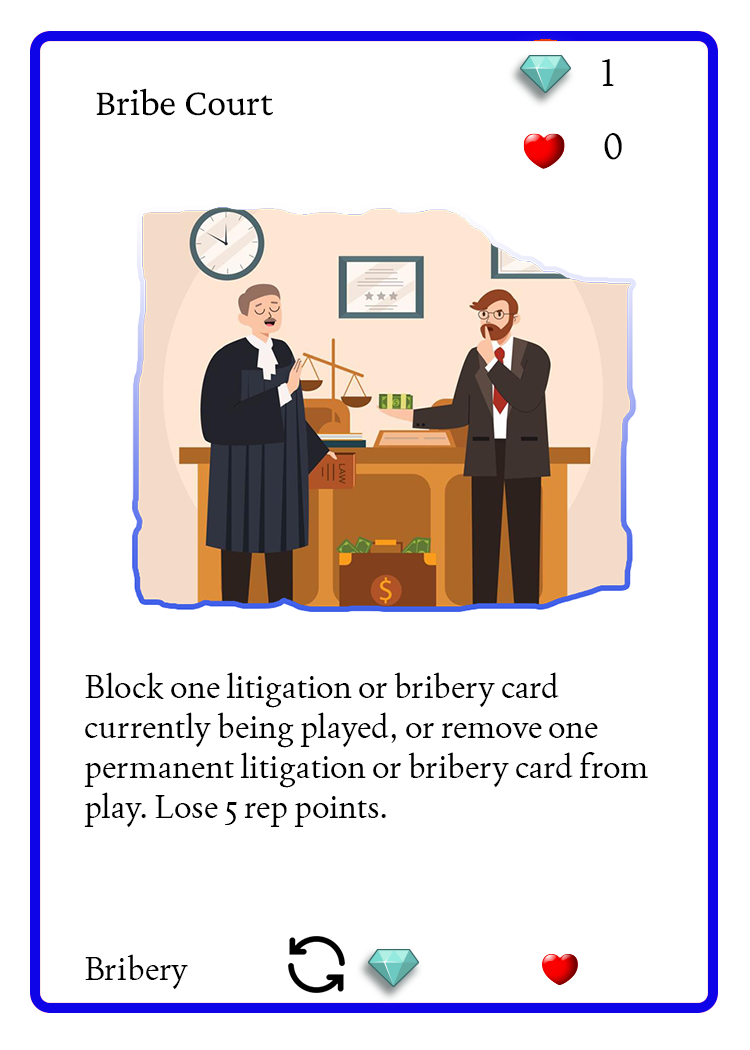
<style>
.page{position:relative;width:750px;height:1050px;background:#ffffff}
.page>*{position:absolute;margin:0}
.t1{font:37.5px "Joan-Regular";color:#000000;text-transform:uppercase}
.t2{font:38.9px "CrimsonPro-Regular";color:#000000}
.t3{font:33.3px "Joan-Regular";color:#000000}
</style>
<div class="page">
<p class="t1" style="left:602px;top:59px;width:12px;height:27px">1</p>
<p class="t2" style="left:96px;top:88px;width:177px;height:28px">Bribe Court</p>
<p class="t1" style="left:604px;top:133px;width:18px;height:27px">0</p>
<p class="t3" style="left:84px;top:672px;width:564px;height:156px">Block one litigation or bribery card currently being played, or remove one permanent litigation or bribery card from play. Lose 5 rep points.</p>
<p class="t3" style="left:85px;top:954px;width:103px;height:36px">Bribery</p>
</div>
